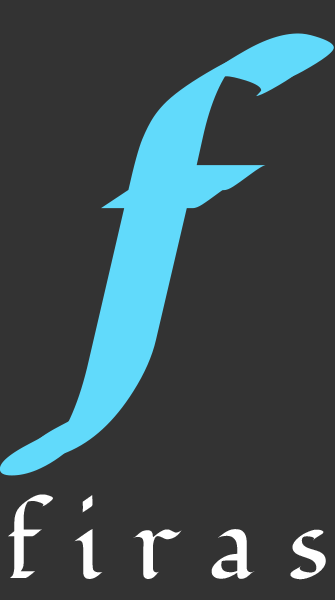
<style>
.page{position:relative;width:335px;height:600px;background:#333333}
.page>*{position:absolute;margin:0}
.t1{font:375px "Fondamento-Italic";color:#61dafb}
.t2{font:100px "Fondamento-Regular";letter-spacing:0.04em;color:#ffffff}
</style>
<div class="page">
<p class="t1" style="left:30px;top:33px;width:304px;height:425px">f</p>
<p class="t2" style="left:8px;top:494px;width:318px;height:86px">f i r a s</p>
</div>
